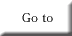
<style>
.page{position:relative;width:72px;height:36px;background:#ffffff}
.page>*{position:absolute;margin:0}
.t1{font:12px "Batang";color:#000000}
</style>
<div class="page">
<p class="t1" style="left:22px;top:13px;width:31px;height:9px">Go to</p>
</div>
